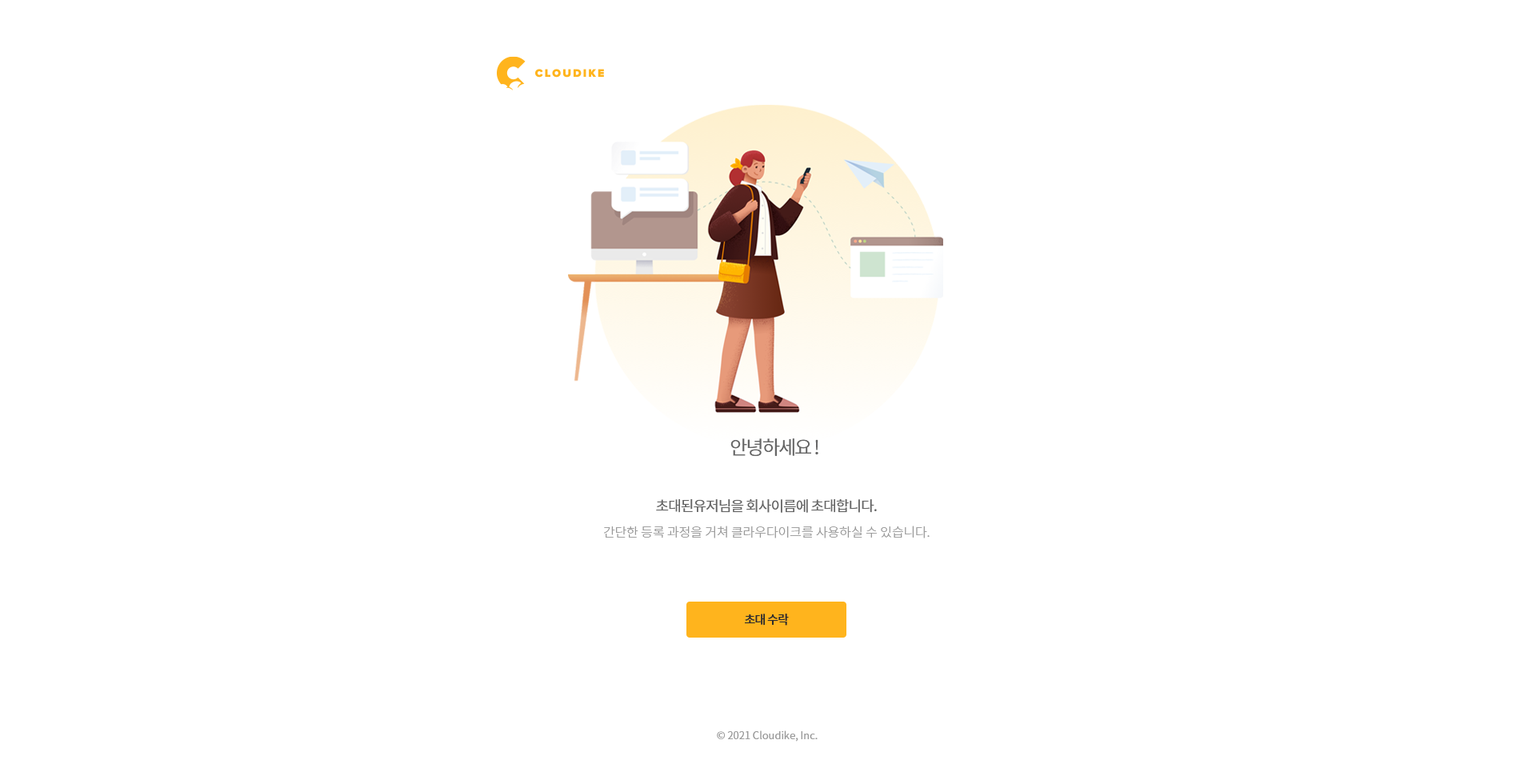
<style>
.page{position:relative;width:1536px;height:776px;background:#ffffff}
.page>*{position:absolute;margin:0}
.t1{font:19.2px "NotoSansCJKkr-DemiLight";letter-spacing:-0.075em;color:#666666}
.t2{font:14.4px "NotoSansCJKkr-Regular";letter-spacing:-0.05em;color:#666666}
.t3{font:12.8px "NotoSansCJKkr-Light";letter-spacing:-0.005em;color:#999999}
.t4{font:12px "NotoSansCJKkr-Medium";letter-spacing:-0.05em;color:#2d2d2d}
.t5{font:10.4px "NotoSansCJKkr-DemiLight";color:#999999}
</style>
<div class="page">
<p class="t1" style="left:731px;top:438px;width:88px;height:18px">안녕하세요 !</p>
<p class="t2" style="left:656px;top:499px;width:221px;height:14px">초대된유저님을 회사이름에 초대합니다.</p>
<p class="t3" style="left:604px;top:526px;width:326px;height:13px">간단한 등록 과정을 거쳐 클라우다이크를 사용하실 수 있습니다.</p>
<p class="t4" style="left:745px;top:614px;width:44px;height:12px">초대 수락</p>
<p class="t5" style="left:717px;top:731px;width:101px;height:11px">© 2021 Cloudike, Inc.</p>
</div>
